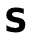
<style>
.page{position:relative;width:32px;height:41px;background:#ffffff}
.page>*{position:absolute;margin:0}
.t1{font:33px "DejaVuSans-Bold";color:#000000}
</style>
<div class="page">
<p class="t1" style="left:6px;top:7px;width:20px;height:26px">S</p>
</div>
